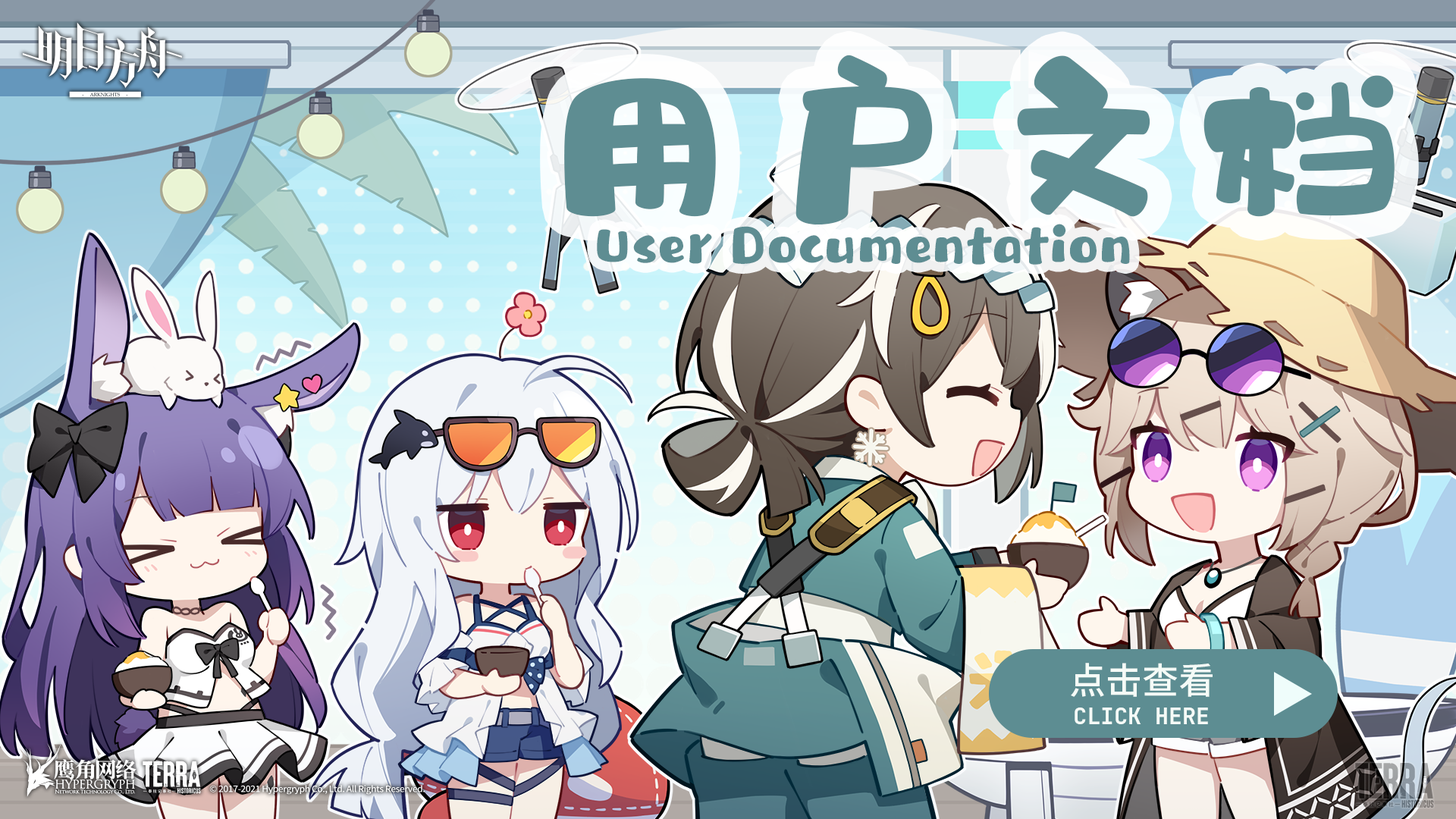
<style>
.page{position:relative;width:1456px;height:819px}
.page>*{position:absolute;margin:0}
.t1{font:227.5px "HYNuoMiTuanW";letter-spacing:-0.03em;color:#5e8d92}
.t2{font:60.7px "HYNuoMiTuanW";color:#5e8d92}
.t3{font:36.4px "SourceHanSansSC-Medium";color:#f5fbf7}
.t4{font:22.7px "JetBrainsMono-Bold";color:#f5fbf7}
</style>
<div class="page">
<p class="t1" style="left:564px;top:55px;width:831px;height:170px">用户文档</p>
<p class="t2" style="left:597px;top:224px;width:533px;height:41px">User Documentation</p>
<p class="t3" style="left:1071px;top:663px;width:142px;height:34px">点击查看</p>
<p class="t4" style="left:1075px;top:708px;width:133px;height:16px">CLICK HERE</p>
</div>
